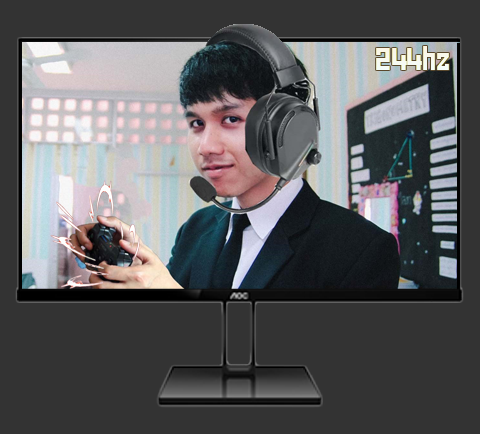
<style>
.page{position:relative;width:480px;height:434px;background:#333333}
.page>*{position:absolute;margin:0}
.t1{font:34.7px "DBSiamSquareX-ExtraBold";color:#ffffff}
</style>
<div class="page">
<p class="t1" style="left:376px;top:46px;width:73px;height:24px">244hz</p>
</div>
